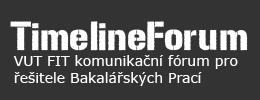
<style>
.page{position:relative;width:260px;height:100px;background:#333333}
.page>*{position:absolute;margin:0}
.t1{font:40px "UrbanSketch";color:#ffffff}
.t2{font:14px "Verdana";color:#ffffff}
</style>
<div class="page">
<p class="t1" style="left:10px;top:21px;width:238px;height:30px">TimelineForum</p>
<p class="t2" style="left:13px;top:55px;width:225px;height:31px">VUT FIT komunikační fórum pro<br>řešitele Bakalářských Prací</p>
</div>
